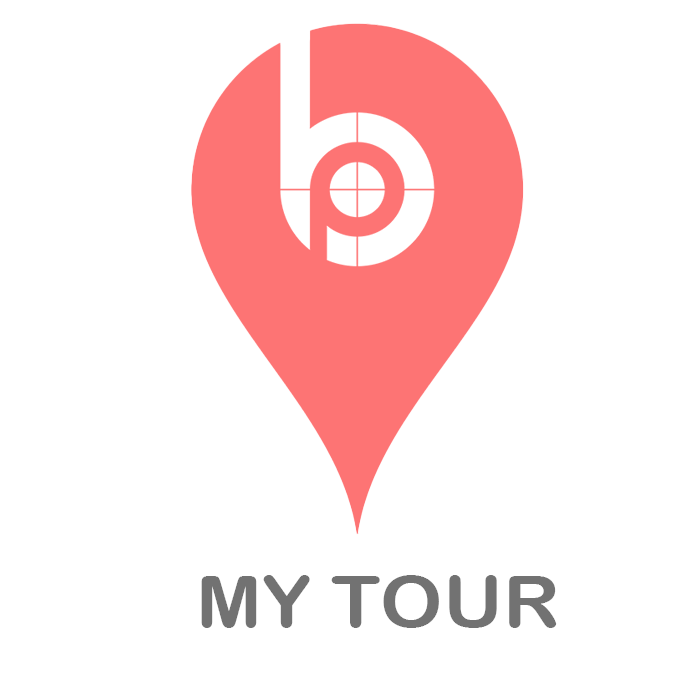
<style>
.page{position:relative;width:700px;height:700px;background:#ffffff}
.page>*{position:absolute;margin:0}
.t1{font:72px "ArialRoundedMTBold";color:#727272;scale:1.1 1}
</style>
<div class="page">
<p class="t1" style="left:201px;top:575px;width:356px;height:53px">MY TOUR</p>
</div>
